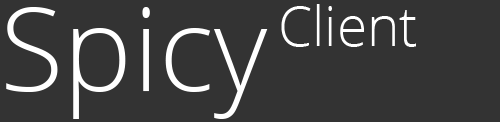
<style>
.page{position:relative;width:500px;height:122px;background:#333333}
.page>*{position:absolute;margin:0}
.t1{font:55px "OpenSans-Light";color:#ffffff}
.t2{font:116.3px "OpenSans-Light";color:#ffffff}
</style>
<div class="page">
<p class="t1" style="left:281px;top:4px;width:135px;height:43px">Client</p>
<p class="t2" style="left:6px;top:7px;width:262px;height:112px">Spicy</p>
</div>
